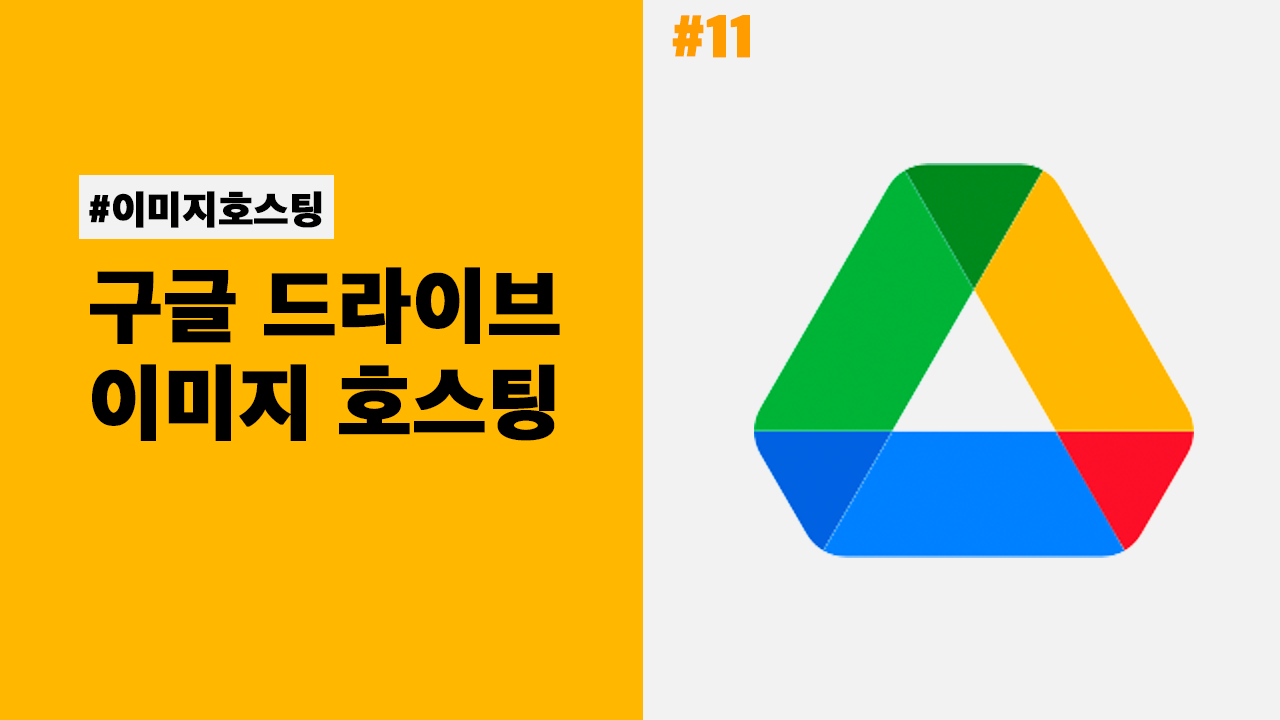
<style>
.page{position:relative;width:1280px;height:720px;background:#ffb700}
.page>*{position:absolute;margin:0}
.t1{font:60px "AppleSDGothicNeo-Heavy";color:#ff9c00;font-weight:bold}
.t2{font:40px "AppleSDGothicNeo-Heavy";color:#000000;font-weight:bold}
.t3{font:84px/97px "AppleSDGothicNeo-Heavy";color:#000000;font-weight:bold}
</style>
<div class="page">
<p class="t1" style="left:672px;top:15px;width:78px;height:43px">#11</p>
<p class="t2" style="left:89px;top:191px;width:233px;height:37px">#이미지호스팅</p>
<p class="t3" style="left:90px;top:267px;width:470px;height:174px">구글 드라이브<br>이미지 호스팅</p>
</div>
